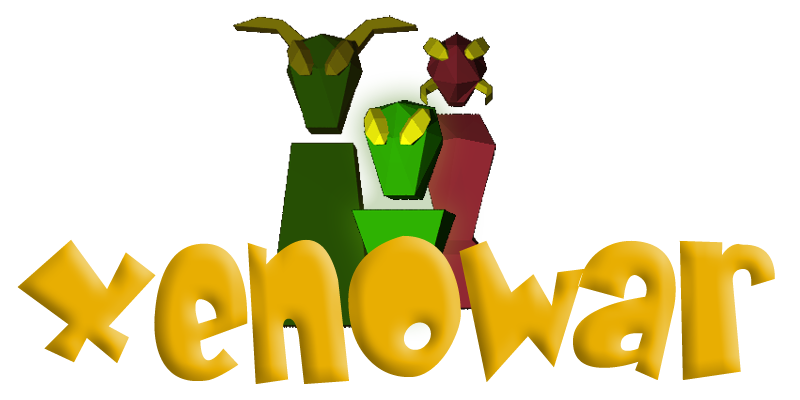
<style>
.page{position:relative;width:800px;height:400px;background:#ffffff}
.page>*{position:absolute;margin:0}
.t1{font:169px "BabyKruffy";letter-spacing:0.05em}
</style>
<div class="page">
<p class="t1" style="left:17px;top:235px;width:758px;height:149px">Xenowar</p>
</div>
